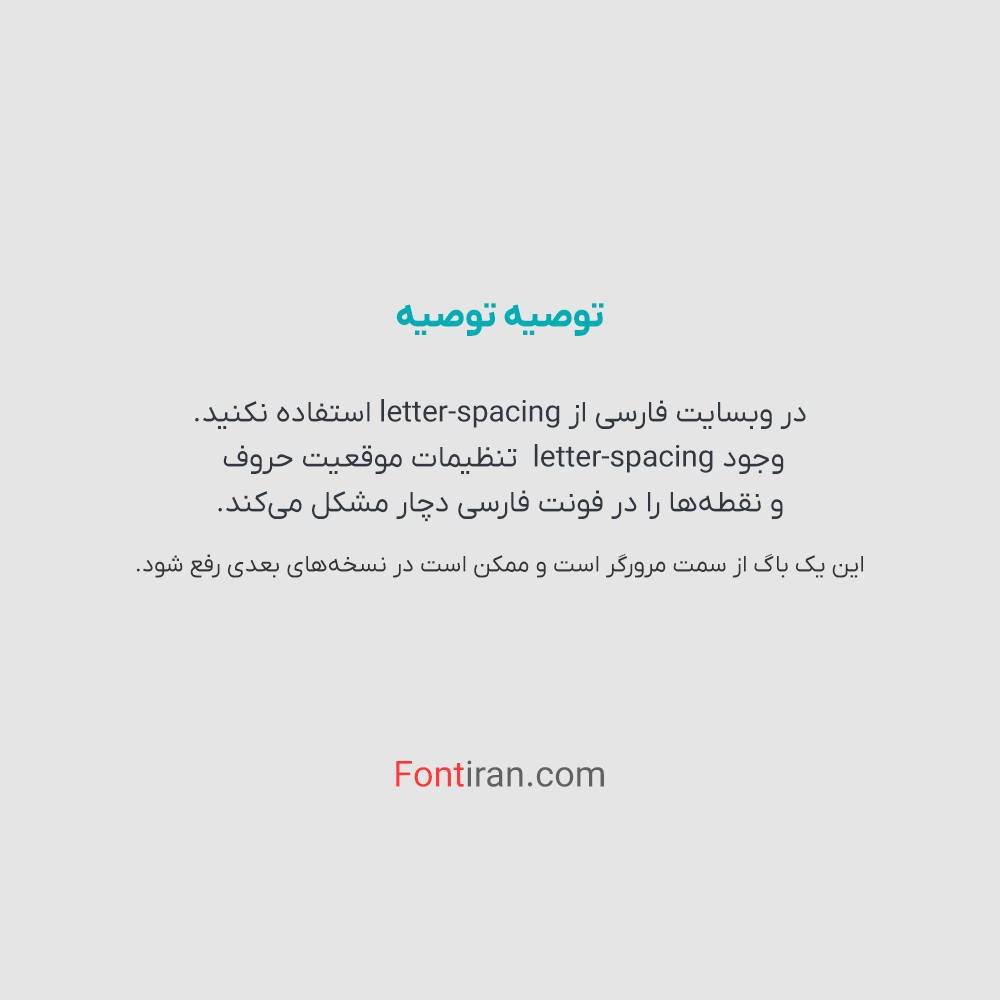
<style>
.page{position:relative;width:1000px;height:1000px;background:#e5e5e5}
.page>*{position:absolute;margin:0}
.t1{font:30px/45px "IRANYekanX-Regular";color:#303841}
.t2{font:36px/50px "IRANYekanX-ExtraBold";color:#00adb5}
.t3{font:36px/50px "Dana-Regular";color:#343434}
.t4{font:30px/30px "Dana-Regular";color:#343434}
.t5{font:24px/30px "IRANYekanX-Regular";color:#343434}
.t6{font:24px/30px "Dana-Regular";color:#343434}
.t7{font:24px/45px "Dana-Regular";color:#343434}
.t8{font:36px/50px "IRANYekanX-Regular";color:#ff3939}
.t9{font:36px/50px "IRANYekanX-Regular";color:#616161}
</style>
<div class="page">
<p class="t1" style="left:136px;top:303px;width:727px;height:484px;text-align:center"><span class="t2">توصیه توصیه<br></span><span class="t3"><br></span>در وبسایت‌ فارسی از letter-spacing استفاده نکنید.<br>وجود letter-spacing  تنظیمات موقعیت حروف <br>و نقطه‌ها را در فونت فارسی دچار مشکل می‌کند.<br><span class="t4"><br></span><span class="t5">این یک باگ از سمت مرورگر است و ممکن است در نسخه‌های بعدی رفع شود.<br></span><span class="t6"><br><br><br><br></span><span class="t7"><br></span><span class="t8">Font</span><span class="t9">iran.com</span></p>
</div>
